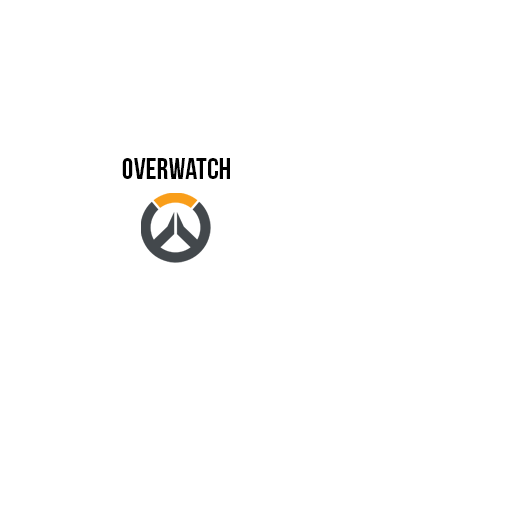
<style>
.page{position:relative;width:512px;height:512px;background:#ffffff}
.page>*{position:absolute;margin:0}
.t1{font:30px "BebasNeue";color:#000000}
</style>
<div class="page">
<p class="t1" style="left:122px;top:158px;width:108px;height:21px">overwatch</p>
</div>
